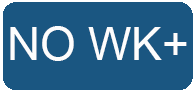
<style>
.page{position:relative;width:196px;height:92px;background:#1a5681}
.page>*{position:absolute;margin:0}
.t1{font:45.8px "ArialMT";color:#fdfdfd}
</style>
<div class="page">
<p class="t1" style="left:10px;top:26px;width:177px;height:35px">NO WK+</p>
</div>
